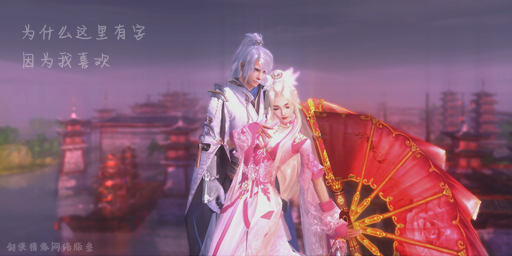
<style>
.page{position:relative;width:512px;height:256px}
.page>*{position:absolute;margin:0}
.t1{font:16.6px "AaQingCong";letter-spacing:0.11em;color:#9591a3}
.t2{font:16.6px "AaQingCong";letter-spacing:0.11em;color:#a69bb1}
.t3{font:9.8px "AaQingCong";letter-spacing:0.11em;color:#7c6f86;font-weight:bold}
</style>
<div class="page">
<p class="t1" style="left:22px;top:24px;width:123px;height:17px">为什么这里有字</p>
<p class="t2" style="left:22px;top:52px;width:88px;height:17px">因为我喜欢</p>
<p class="t3" style="left:6px;top:241px;width:87px;height:11px">剑侠情缘网络版叁</p>
</div>
